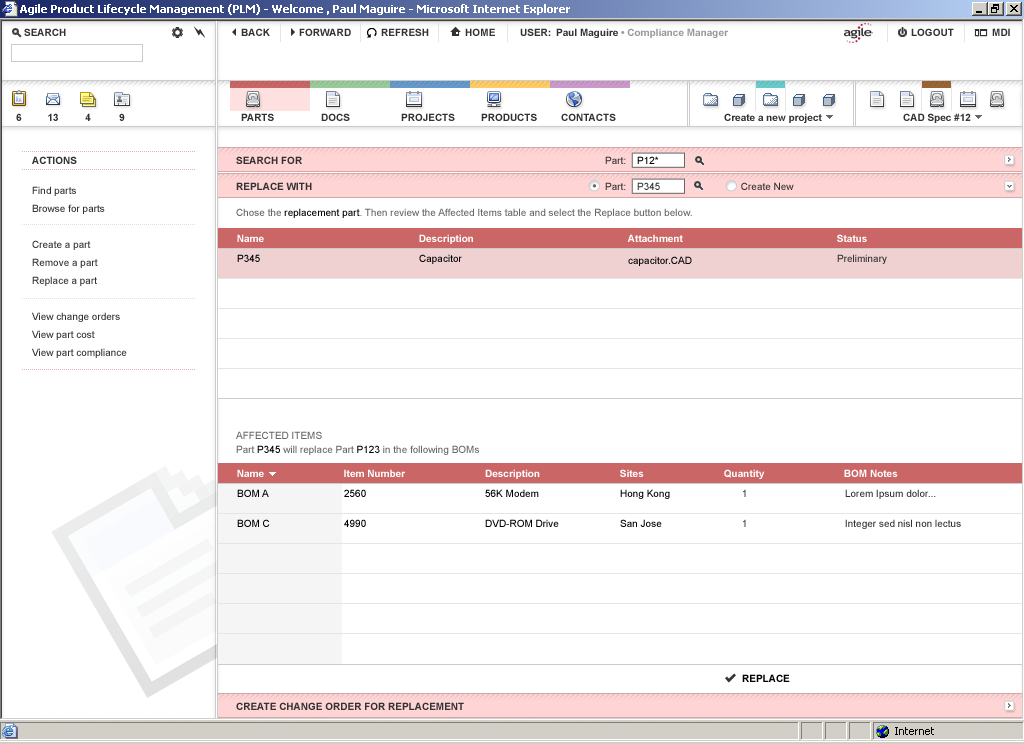
<style>
.page{position:relative;width:1024px;height:744px;background:#ffffff}
.page>*{position:absolute;margin:0}
.t1{font:10px "Arial-BoldMT";color:#333333}
.t2{font:10px "ArialMT"}
.t3{font:10px "ArialMT";color:#000000}
.t4{font:10px "ArialMT";color:#333333}
.t5{font:10px/18px "ArialMT";color:#333333}
.t6{font:10px "ArialMT";color:#666666}
.t7{font:10px "Arial-BoldMT";color:#ffffff}
.t8{font:10px/14px "ArialMT";color:#666666}
.t9{font:10px/14px "ArialMT";color:#000000}
.t10{font:10px/10px "ArialMT";color:#000000}
.t11{font:10px/10px "ArialMT"}
.t12{font:10px/10px "ArialMT";color:#333333}
.t13{font:10px "Arial-BoldMT";color:#000000}
</style>
<div class="page">
<p class="t1" style="left:32px;top:156px;width:45px;height:8px">ACTIONS</p>
<p class="t1" style="left:236px;top:156px;width:66px;height:8px">SEARCH FOR</p>
<p class="t2" style="left:605px;top:156px;width:21px;height:8px">Part:</p>
<p class="t3" style="left:637px;top:156px;width:22px;height:8px">P12*</p>
<p class="t1" style="left:236px;top:182px;width:76px;height:8px">REPLACE WITH</p>
<p class="t4" style="left:605px;top:182px;width:189px;height:8px">Part:             Create New</p>
<p class="t4" style="left:637px;top:182px;width:23px;height:8px">P345</p>
<p class="t5" style="left:32px;top:186px;width:95px;height:172px">Find parts<br>Browse for parts<br><br>Create a part<br>Remove a part<br>Replace a part<br><br>View change orders<br>View part cost<br>View part compliance</p>
<p class="t6" style="left:236px;top:208px;width:456px;height:10px">Chose the <span class="t3">replacement part</span>. Then review the Affected Items table and select the Replace button below.</p>
<p class="t7" style="left:237px;top:234px;width:27px;height:8px">Name</p>
<p class="t7" style="left:419px;top:234px;width:54px;height:10px">Description</p>
<p class="t7" style="left:627px;top:234px;width:56px;height:8px">Attachment</p>
<p class="t7" style="left:837px;top:234px;width:30px;height:8px">Status</p>
<p class="t3" style="left:237px;top:254px;width:23px;height:8px">P345</p>
<p class="t3" style="left:419px;top:254px;width:43px;height:10px">Capacitor</p>
<p class="t3" style="left:628px;top:256px;width:64px;height:10px">capacitor.CAD</p>
<p class="t4" style="left:837px;top:254px;width:50px;height:10px">Preliminary</p>
<p class="t8" style="left:236px;top:431px;width:243px;height:24px">AFFECTED ITEMS<br>Part <span class="t9">P345</span> will replace Part<span class="t9"> P123</span> in the following BOMs</p>
<p class="t7" style="left:237px;top:469px;width:27px;height:8px">Name</p>
<p class="t7" style="left:344px;top:469px;width:62px;height:8px">Item Number</p>
<p class="t7" style="left:485px;top:469px;width:55px;height:10px">Description</p>
<p class="t7" style="left:620px;top:469px;width:24px;height:8px">Sites</p>
<p class="t7" style="left:724px;top:469px;width:41px;height:10px">Quantity</p>
<p class="t7" style="left:844px;top:469px;width:54px;height:8px">BOM Notes</p>
<p class="t10" style="left:237px;top:489px;width:33px;height:38px">BOM A<br><br><br>BOM C</p>
<p class="t10" style="left:344px;top:489px;width:22px;height:38px">2560<br><br><br>4990</p>
<p class="t10" style="left:485px;top:489px;width:74px;height:38px">56K Modem<br><br><br>DVD-ROM Drive</p>
<p class="t10" style="left:620px;top:489px;width:50px;height:38px">Hong Kong<br><br><br>San Jose</p>
<p class="t11" style="left:743px;top:489px;width:3px;height:38px">1<br><br><br>1</p>
<p class="t12" style="left:845px;top:489px;width:116px;height:40px">Lorem Ipsum dolor...<br><br><br>Integer sed nisl non lectus</p>
<p class="t13" style="left:742px;top:674px;width:48px;height:8px">REPLACE</p>
<p class="t1" style="left:236px;top:702px;width:228px;height:8px">CREATE CHANGE ORDER FOR REPLACEMENT</p>
</div>
